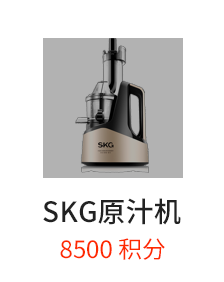
<style>
.page{position:relative;width:224px;height:282px;background:#ffffff}
.page>*{position:absolute;margin:0}
.t1{font:28px "SourceHanSansCN-Medium";color:#222222}
.t2{font:24px "SourceHanSansCN-Regular";color:#fe2a00}
</style>
<div class="page">
<p class="t1" style="left:43px;top:198px;width:138px;height:27px">SKG原汁机</p>
<p class="t2" style="left:60px;top:238px;width:105px;height:22px">8500 积分</p>
</div>
